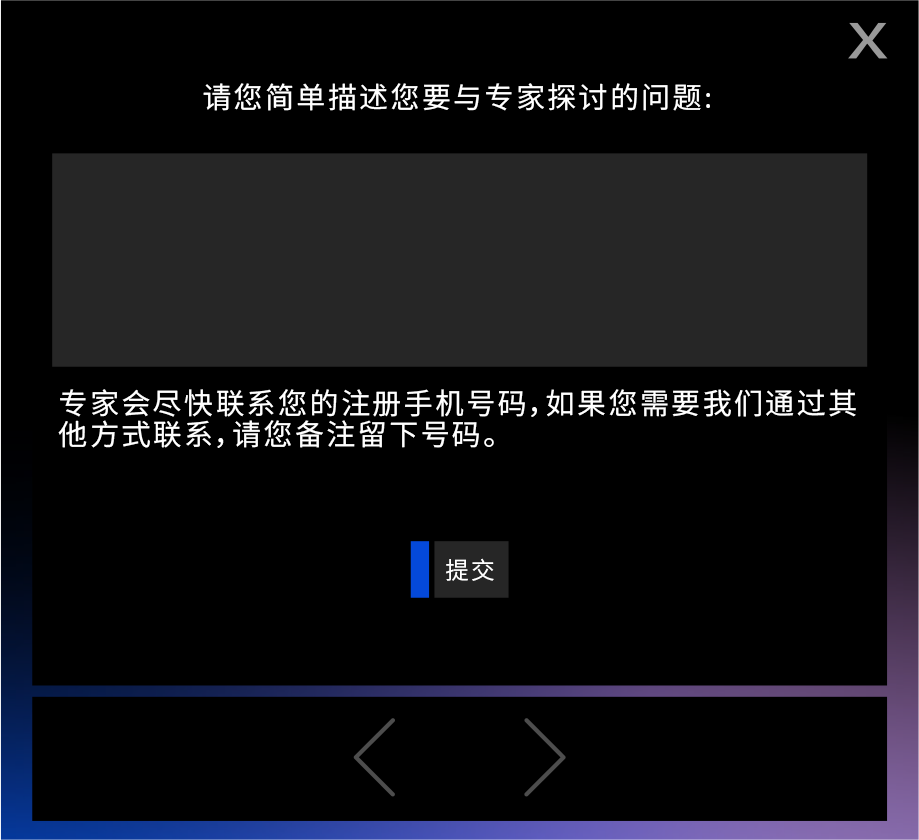
<style>
.page{position:relative;width:919px;height:840px;background:#000000}
.page>*{position:absolute;margin:0}
.t1{font:29.2px "NotoSansCJKsc-Regular";letter-spacing:0.075em;color:#ffffff}
.t2{font:29.2px/31px "NotoSansCJKsc-Regular";letter-spacing:0.075em;color:#ffffff}
.t3{font:23.8px "NotoSansCJKsc-DemiLight";letter-spacing:0.075em;color:#ffffff}
</style>
<div class="page">
<p class="t1" style="left:203px;top:83px;width:507px;height:28px">请您简单描述您要与专家探讨的问题:</p>
<p class="t2" style="left:58px;top:389px;width:798px;height:59px">专家会尽快联系您的注册手机号码，如果您需要我们通过其他方式联系，请您备注留下号码。</p>
<p class="t3" style="left:446px;top:558px;width:48px;height:23px">提交</p>
</div>
